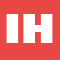
<style>
.page{position:relative;width:60px;height:60px;background:#e94646}
.page>*{position:absolute;margin:0}
.t1{font:37.6px "GillSans-UltraBold";color:#ffffff;scale:0.94 1}
</style>
<div class="page">
<p class="t1" style="left:6px;top:14px;width:47px;height:29px">IH</p>
</div>
